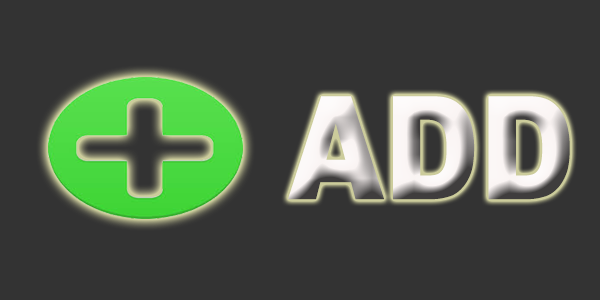
<style>
.page{position:relative;width:600px;height:300px;background:#333333}
.page>*{position:absolute;margin:0}
.t1{font:143.4px "Arial-Black";scale:0.86 1}
</style>
<div class="page">
<p class="t1" style="left:288px;top:96px;width:282px;height:104px">ADD</p>
</div>
